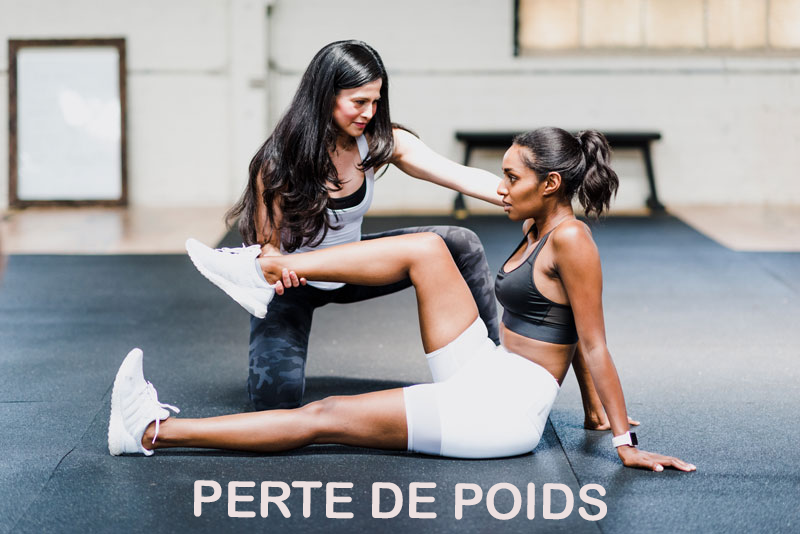
<style>
.page{position:relative;width:800px;height:534px}
.page>*{position:absolute;margin:0}
.t1{font:50px "ArialRoundedMTBold";color:#ece0e0}
</style>
<div class="page">
<p class="t1" style="left:194px;top:480px;width:413px;height:41px;rotate:1deg">PERTE DE POIDS</p>
</div>
